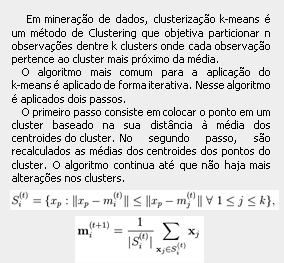
<style>
.page{position:relative;width:284px;height:263px;background:#eeeeee}
.page>*{position:absolute;margin:0}
.t1{font:11px "Tahoma";color:#000000}
</style>
<div class="page">
<p class="t1" style="left:12px;top:14px;width:258px;height:170px;text-align:justify">Em mineração de dados, clusterização k-means é um método de Clustering que objetiva particionar n observações dentre k clusters onde cada observação pertence ao cluster mais próximo da média.<br>O algoritmo mais comum para a aplicação do k-means é aplicado de forma iterativa. Nesse algoritmo é aplicados dois passos. <br>O primeiro passo consiste em colocar o ponto em um cluster baseado na sua distância à média dos centroides do cluster.  No segundo passo, são recalculados as médias dos centroides dos pontos do cluster. O algoritmo continua até que não haja mais alterações nos clusters.</p>
</div>
